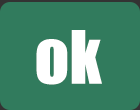
<style>
.page{position:relative;width:140px;height:110px;background:#317b5d}
.page>*{position:absolute;margin:0}
.t1{font:68px "Impact";color:#ffffff}
</style>
<div class="page">
<p class="t1" style="left:36px;top:30px;width:66px;height:55px">ok</p>
</div>
